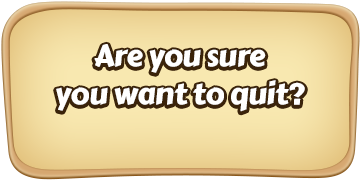
<style>
.page{position:relative;width:363px;height:181px}
.page>*{position:absolute;margin:0}
.t1{font:30px/38px "CarterOne";letter-spacing:-0.02em;color:#ffffff}
</style>
<div class="page">
<p class="t1" style="left:56px;top:44px;width:249px;height:68px;text-align:center">Are you sure<br>you want to quit?</p>
</div>
